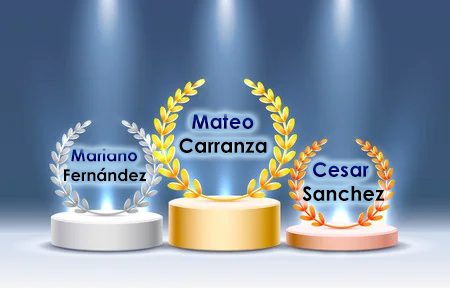
<style>
.page{position:relative;width:450px;height:288px}
.page>*{position:absolute;margin:0}
.t1{font:20px "CenturyGothic-Bold"}
.t2{font:16.5px "CenturyGothic-Bold"}
</style>
<div class="page">
<p class="t1" style="left:179px;top:114px;width:88px;height:39px;text-align:center">Mateo <br>Carranza</p>
<p class="t2" style="left:64px;top:148px;width:83px;height:34px;text-align:center">Mariano<br>Fernández</p>
<p class="t1" style="left:302px;top:162px;width:83px;height:39px;text-align:center">Cesar <br> Sanchez</p>
</div>
